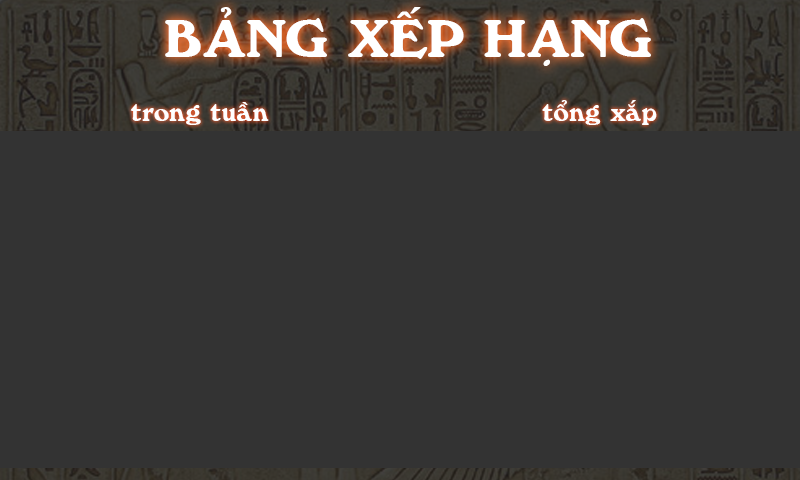
<style>
.page{position:relative;width:800px;height:480px;background:#333333}
.page>*{position:absolute;margin:0}
.t1{font:48px "Windsor-Bold";color:#ffffff}
.t2{font:24px "Windsor-Bold";color:#ffffff}
</style>
<div class="page">
<p class="t1" style="left:165px;top:7px;width:486px;height:59px">BẢNG XẾP HẠNG</p>
<p class="t2" style="left:130px;top:102px;width:139px;height:23px">trong tuần</p>
<p class="t2" style="left:542px;top:100px;width:115px;height:25px">tổng xắp</p>
</div>
